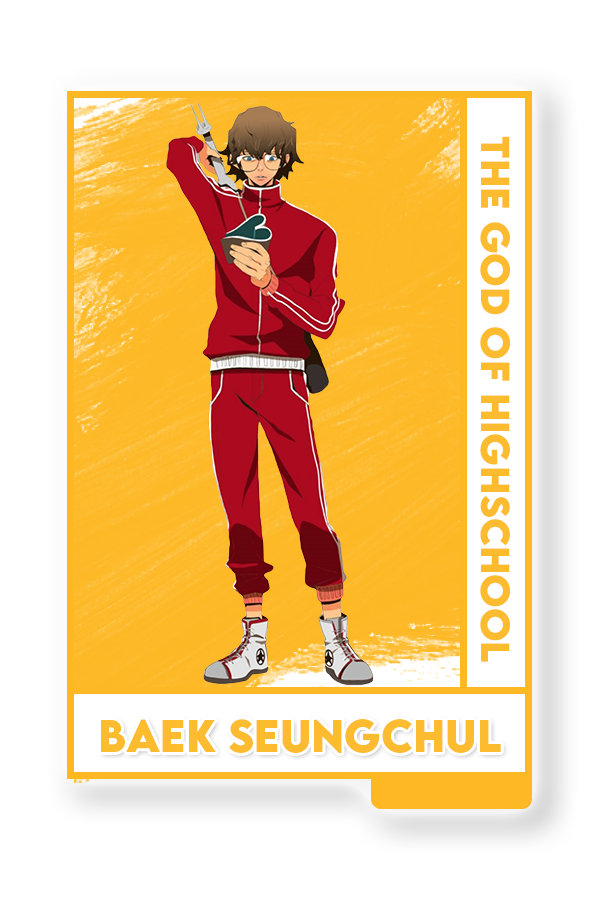
<style>
.page{position:relative;width:600px;height:900px;background:#ffffff}
.page>*{position:absolute;margin:0}
.t1{font:36px "LEMONMILK-Bold";color:#fdbc30}
.t2{font:40.6px "LEMONMILK-Bold";color:#fdbc30}
</style>
<div class="page">
<p class="t1" style="left:480px;top:136px;width:30px;height:526px;rotate:90deg">the god of highschool</p>
<p class="t2" style="left:101px;top:719px;width:400px;height:34px">Baek Seungchul</p>
</div>
